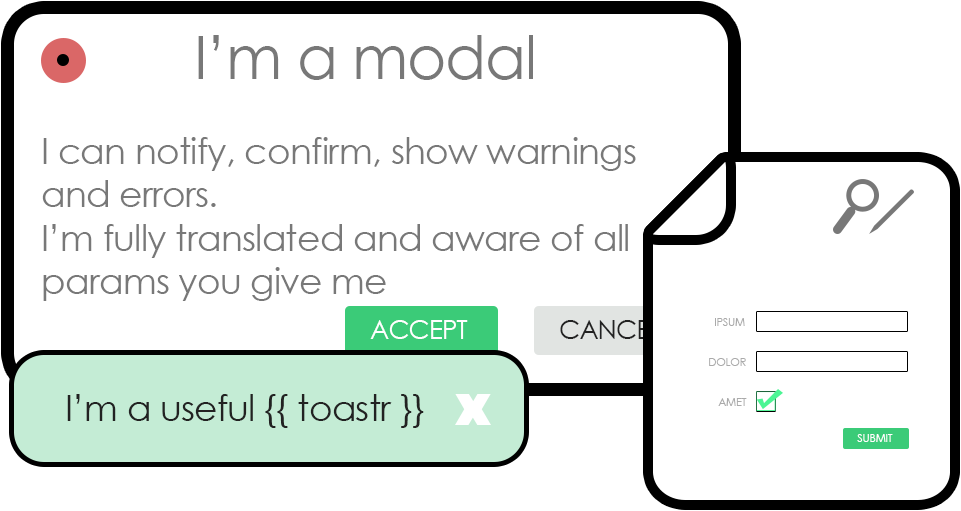
<style>
.page{position:relative;width:961px;height:511px;background:#ffffff}
.page>*{position:absolute;margin:0}
.t1{font:60px "CenturyGothic";letter-spacing:-0.02em;color:#787878}
.t2{font:36px "CenturyGothic";letter-spacing:-0.02em;color:#787878}
.t3{font:11px "CenturyGothic";letter-spacing:-0.02em;color:#aaaaaa}
.t4{font:25.7px "CenturyGothic";letter-spacing:-0.02em;color:#ffffff}
.t5{font:25.7px "CenturyGothic";letter-spacing:-0.02em;color:#222222}
.t6{font:36px "CenturyGothic";letter-spacing:-0.02em;color:#222222}
.t7{font:11px "CenturyGothic";letter-spacing:-0.02em;color:#ffffff}
</style>
<div class="page">
<p class="t1" style="left:198px;top:35px;width:335px;height:45px">I’m a modal</p>
<p class="t2" style="left:42px;top:137px;width:594px;height:164px">I can notify, confirm, show warnings and errors.<br>I’m fully translated and aware of all params you give me</p>
<p class="t3" style="left:715px;top:318px;width:30px;height:8px">IPSUM</p>
<p class="t4" style="left:370px;top:320px;width:98px;height:19px">ACCEPT</p>
<p class="t5" style="left:560px;top:320px;width:101px;height:19px">CANCEL</p>
<p class="t3" style="left:709px;top:358px;width:37px;height:8px">DOLOR</p>
<p class="t6" style="left:67px;top:394px;width:357px;height:34px">I’m a useful {{ toastr }}</p>
<p class="t3" style="left:718px;top:398px;width:29px;height:8px">AMET</p>
<p class="t7" style="left:857px;top:434px;width:36px;height:8px">SUBMIT</p>
</div>
